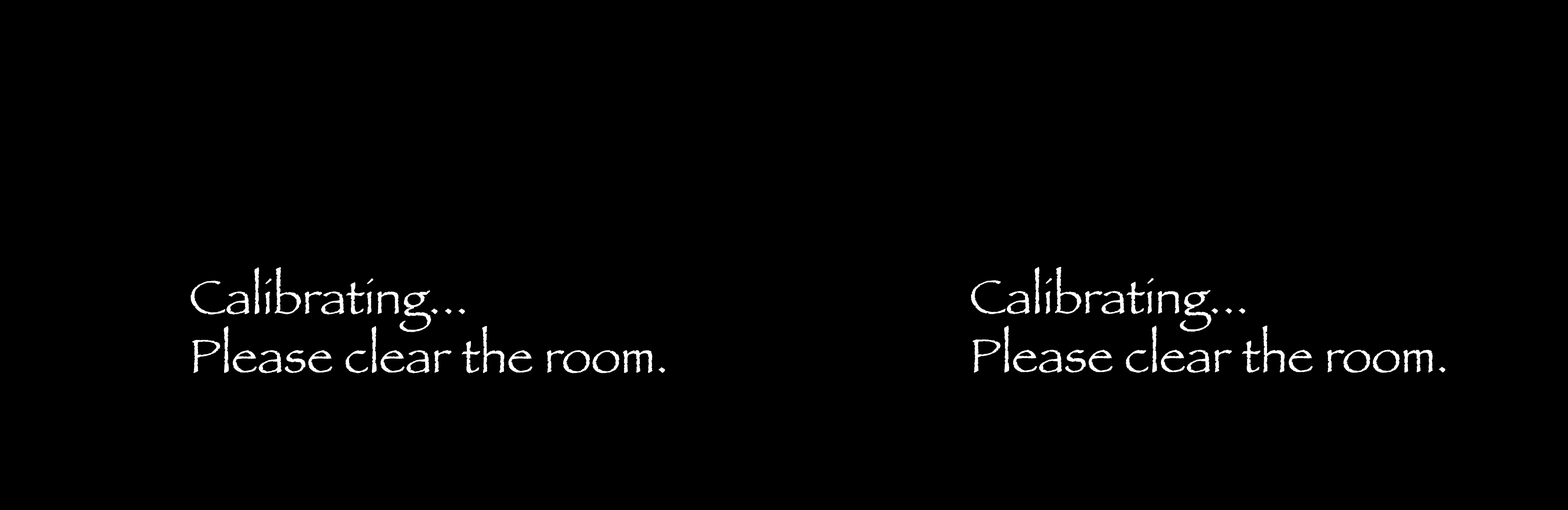
<style>
.page{position:relative;width:1568px;height:510px;background:#000000}
.page>*{position:absolute;margin:0}
.t1{font:49px "Papyrus";color:#ffffff}
</style>
<div class="page">
<p class="t1" style="left:190px;top:267px;width:475px;height:107px">Calibrating...<br>Please clear the room.</p>
<p class="t1" style="left:971px;top:267px;width:475px;height:106px">Calibrating...<br>Please clear the room.</p>
</div>
